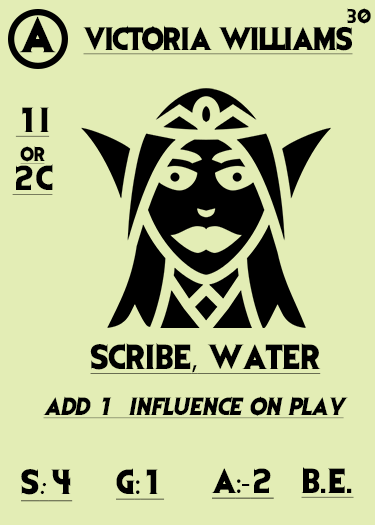
<style>
.page{position:relative;width:375px;height:525px;background:#e3edb5}
.page>*{position:absolute;margin:0}
.t1{font:41.7px "EvilDead";letter-spacing:-0.05em;color:#000000}
.t2{font:16.7px "EvilDead";letter-spacing:-0.05em;color:#000000}
.t3{font:27.1px "EvilDead";letter-spacing:-0.025em;color:#000000;text-decoration:underline}
.t4{font:29.2px/29.2px "EvilDead";color:#000000;text-decoration:underline}
.t5{font:16.7px/29.2px "EvilDead";color:#000000;text-decoration:underline}
.t6{font:29.2px "EvilDead";color:#000000;text-decoration:underline}
.t7{font:29.2px "MyriadPro-Regular";color:#000000;text-decoration:underline}
.t8{font:20.8px "EvilDead";color:#000000;font-style:italic;text-decoration:underline}
.t9{font:29.2px "Fadli-Script";color:#000000;text-decoration:underline}
</style>
<div class="page">
<p class="t1" style="left:19px;top:16px;width:37px;height:37px">A</p>
<p class="t2" style="left:347px;top:8px;width:24px;height:16px">30</p>
<p class="t3" style="left:83px;top:25px;width:270px;height:30px">VICTORIA WILLIAMS</p>
<p class="t4" style="left:12px;top:107px;width:41px;height:88px;text-align:center">1I<br><span class="t5">or<br></span>2C</p>
<p class="t6" style="left:90px;top:343px;width:231px;height:31px">SCRIBE<span class="t7">,</span> WATER</p>
<p class="t8" style="left:43px;top:396px;width:305px;height:23px">Add 1  influence on play</p>
<p class="t6" style="left:21px;top:469px;width:52px;height:33px">S<span class="t9">:</span>4</p>
<p class="t6" style="left:116px;top:468px;width:49px;height:32px">G<span class="t7">:</span>1</p>
<p class="t7" style="left:211px;top:468px;width:63px;height:31px"><span class="t6">A</span>:-<span class="t6">2</span></p>
<p class="t6" style="left:301px;top:467px;width:53px;height:31px">B.E.</p>
</div>
